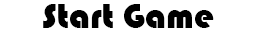
<style>
.page{position:relative;width:256px;height:33px;background:#ffffff}
.page>*{position:absolute;margin:0}
.t1{font:36px "Bauhaus93";color:#000000}
</style>
<div class="page">
<p class="t1" style="left:43px;top:4px;width:171px;height:24px">Start Game</p>
</div>
